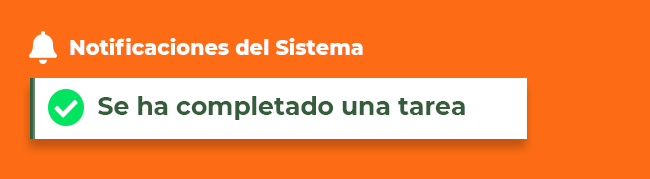
<style>
.page{position:relative;width:650px;height:179px;background:#fd6c14}
.page>*{position:absolute;margin:0}
.t1{font:20.7px "Montserrat-ExtraBold";color:#ffffff}
.t2{font:25px "Montserrat-Bold";color:#345d3a}
</style>
<div class="page">
<p class="t1" style="left:70px;top:38px;width:293px;height:17px">Notificaciones del Sistema</p>
<p class="t2" style="left:98px;top:96px;width:367px;height:24px">Se ha completado una tarea</p>
</div>
